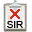
<style>
.page{position:relative;width:32px;height:32px;background:#ffffff}
.page>*{position:absolute;margin:0}
.t1{font:10px "ArialMT";color:#000000}
</style>
<div class="page">
<p class="t1" style="left:7px;top:21px;width:16px;height:7px">SIR</p>
</div>
